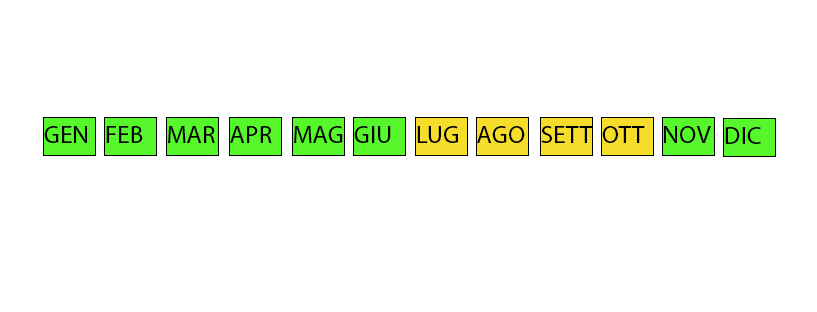
<style>
.page{position:relative;width:817px;height:312px;background:#ffffff}
.page>*{position:absolute;margin:0}
.t1{font:25.4px "MyriadPro-Regular";color:#000000}
</style>
<div class="page">
<p class="t1" style="left:44px;top:126px;width:43px;height:17px">GEN</p>
<p class="t1" style="left:106px;top:126px;width:37px;height:17px">FEB</p>
<p class="t1" style="left:168px;top:126px;width:47px;height:17px">MAR</p>
<p class="t1" style="left:230px;top:126px;width:42px;height:17px">APR</p>
<p class="t1" style="left:294px;top:126px;width:49px;height:17px">MAG</p>
<p class="t1" style="left:354px;top:126px;width:37px;height:17px">GIU</p>
<p class="t1" style="left:417px;top:126px;width:41px;height:17px">LUG</p>
<p class="t1" style="left:477px;top:126px;width:48px;height:17px">AGO</p>
<p class="t1" style="left:541px;top:126px;width:52px;height:17px">SETT</p>
<p class="t1" style="left:602px;top:126px;width:43px;height:17px">OTT</p>
<p class="t1" style="left:664px;top:126px;width:47px;height:17px">NOV</p>
<p class="t1" style="left:725px;top:127px;width:36px;height:17px">DIC</p>
</div>
